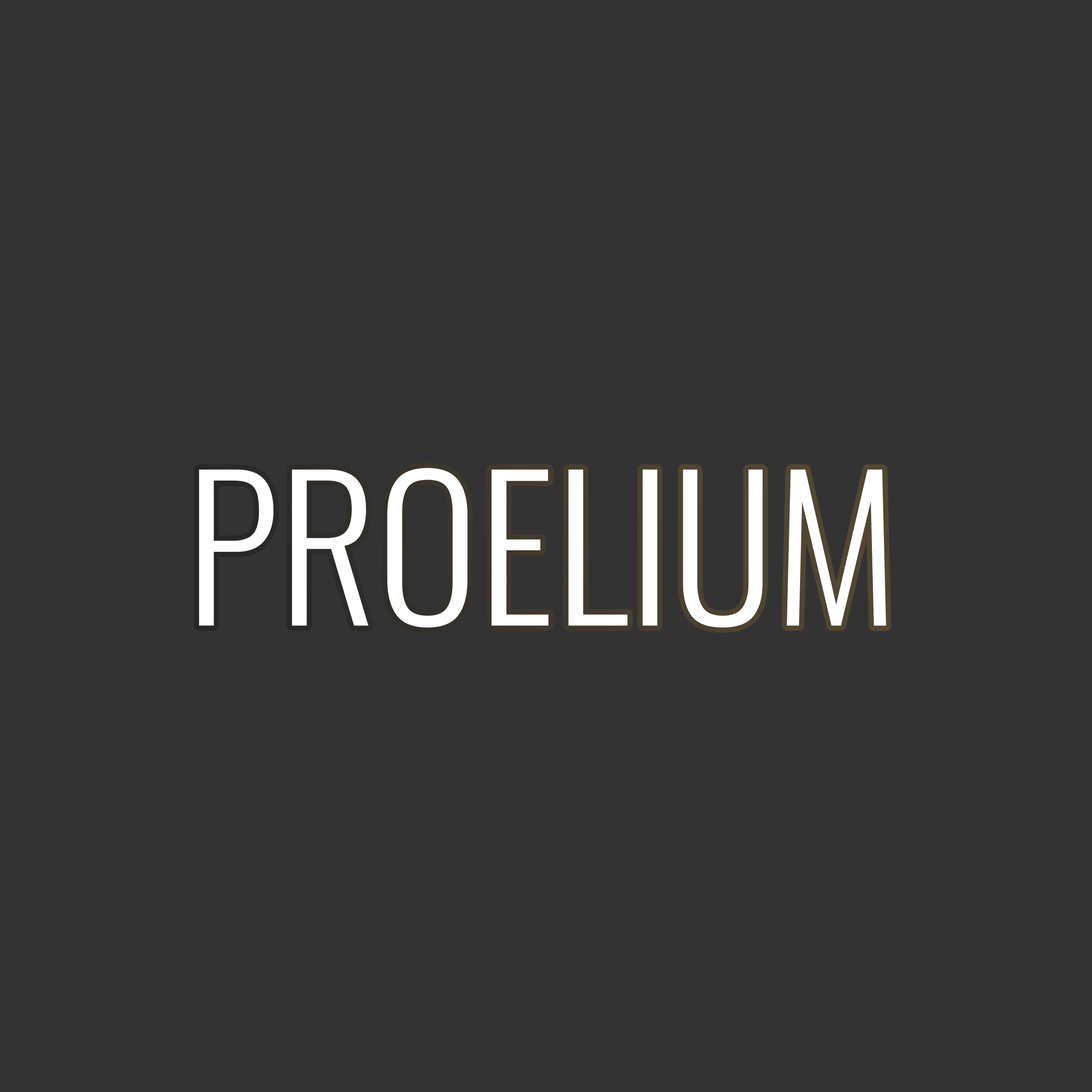
<style>
.page{position:relative;width:1092px;height:1092px;background:#333333}
.page>*{position:absolute;margin:0}
.t1{font:192.6px "Oswald-Light";color:#ffffff}
</style>
<div class="page">
<p class="t1" style="left:199px;top:468px;width:687px;height:160px">PROELIUM</p>
</div>
